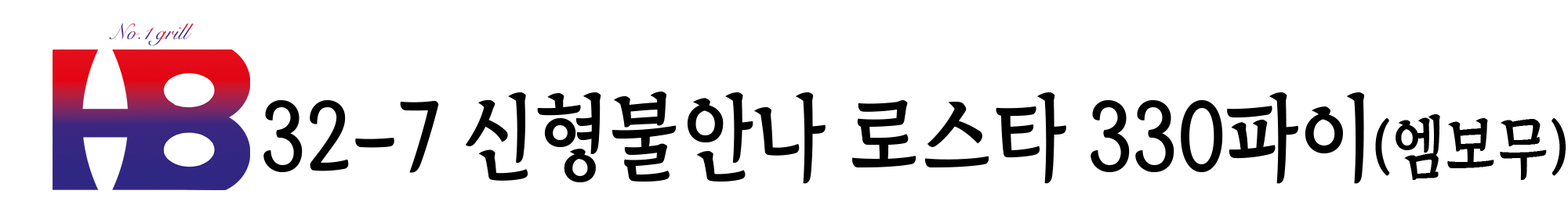
<style>
.page{position:relative;width:1568px;height:205px;background:#ffffff}
.page>*{position:absolute;margin:0}
.t1{font:93.7px "TheIndependenceHallofKorea-Regular";color:#000000;scale:0.89 1}
.t2{font:67.9px "TheIndependenceHallofKorea-Regular";color:#000000;scale:0.89 1}
</style>
<div class="page">
<p class="t1" style="left:263px;top:92px;width:1303px;height:92px">32-7 신형불안나 로스타 330파이<span class="t2">(엠보무)</span></p>
</div>
